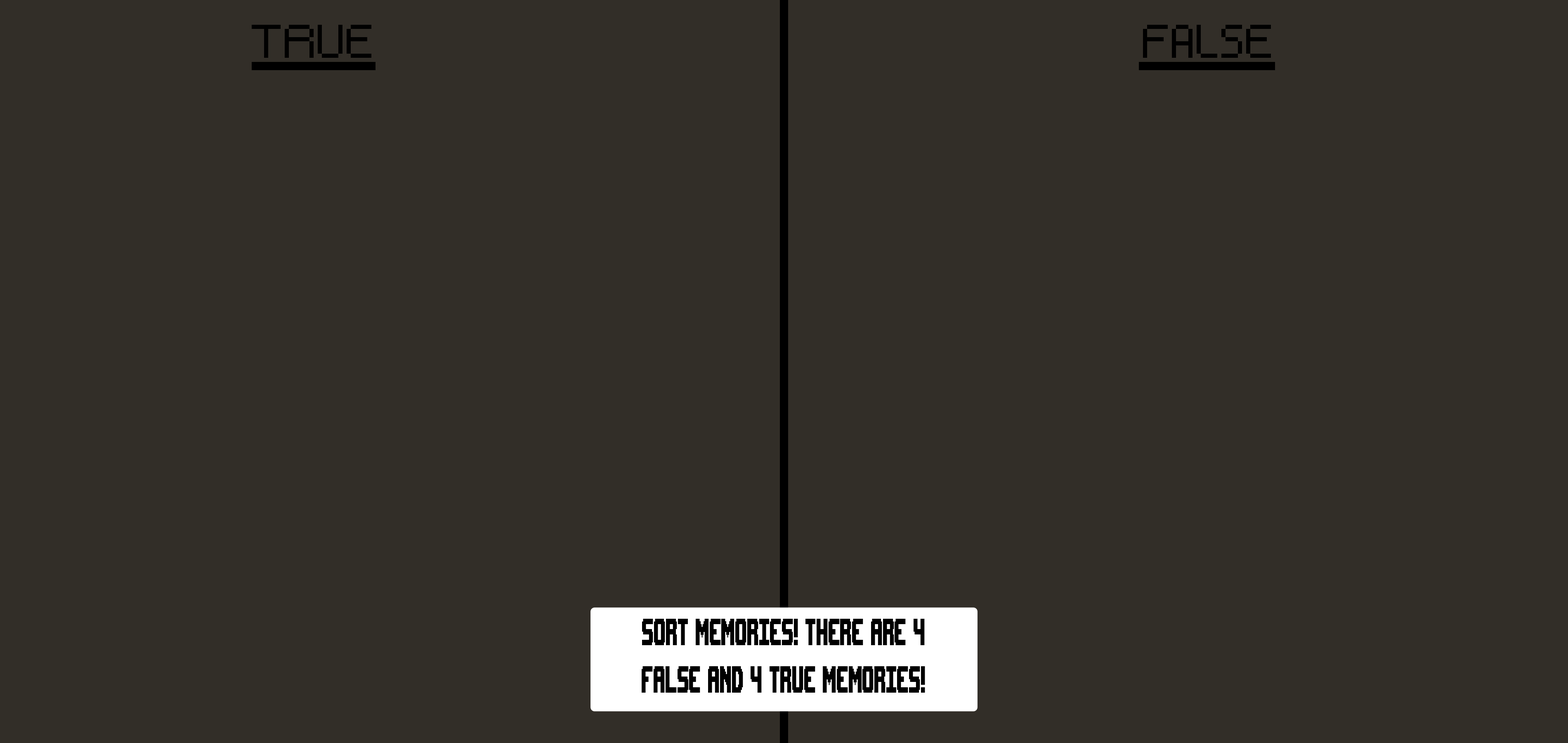
<style>
.page{position:relative;width:1568px;height:743px;background:#322e28}
.page>*{position:absolute;margin:0}
.t1{font:52.9px "UpheavalTT-BRK-";color:#000000;scale:0.37 1}
</style>
<div class="page">
<p class="t1" style="left:642px;top:619px;width:283px;height:73px;text-align:center">Sort memories! There are 4 <br><br>false and 4 true memories!</p>
</div>
